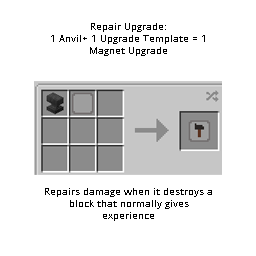
<style>
.page{position:relative;width:256px;height:256px;background:#ffffff}
.page>*{position:absolute;margin:0}
.t1{font:9.8px "OpenSans-Regular";color:#000000}
</style>
<div class="page">
<p class="t1" style="left:45px;top:23px;width:167px;height:198px;text-align:center">Repair Upgrade:<br>1 Anvil+ 1 Upgrade Template = 1 Magnet Upgrade<br><br><br><br><br><br><br><br><br><br><br><br>Repairs damage when it destroys a block that normally gives experience</p>
</div>
